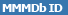
<style>
.page{position:relative;width:68px;height:15px;background:#3776ae}
.page>*{position:absolute;margin:0}
.t1{font:11px "Verdana-Bold";letter-spacing:-0.08em;color:#ffffff}
</style>
<div class="page">
<p class="t1" style="left:2px;top:3px;width:61px;height:9px">MMMDb ID</p>
</div>
